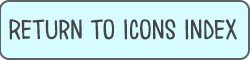
<style>
.page{position:relative;width:250px;height:60px;background:#d7fcff}
.page>*{position:absolute;margin:0}
.t1{font:35px "Love*Monster";color:#454545;font-weight:bold}
</style>
<div class="page">
<p class="t1" style="left:9px;top:19px;width:228px;height:21px">Return to Icons Index</p>
</div>
